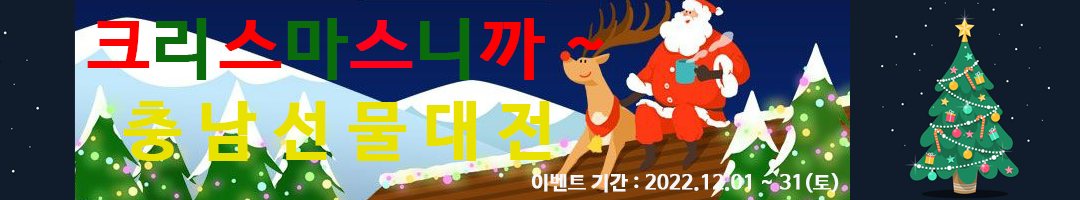
<style>
.page{position:relative;width:1080px;height:200px;background:#101b2c}
.page>*{position:absolute;margin:0}
.t1{font:66px "HCRDotum-Bold";color:#ff0000;font-weight:bold}
.t2{font:60px "HCRDotum-Bold";color:#ff0000;font-weight:bold}
.t3{font:66px "HCRDotum-Bold";color:#0b6c0b;font-weight:bold}
.t4{font:66px "HCRDotum-Bold";color:#ff0018;font-weight:bold}
.t5{font:64px "NanumBarunGothicBold";color:#e9e100;font-weight:bold}
.t6{font:20px "NanumBarunGothicBold";color:#f7f7f7;font-weight:bold}
</style>
<div class="page">
<p class="t1" style="left:87px;top:18px;width:517px;height:62px"><span class="t2"> </span>크<span class="t3">리</span>스<span class="t3">마</span><span class="t4">스</span><span class="t3">니</span>까 ~</p>
<p class="t5" style="left:123px;top:101px;width:428px;height:60px">충 남 선 물 대 전</p>
<p class="t6" style="left:531px;top:173px;width:308px;height:20px">이벤트 기간 : 2022.12.01 ~ 31(토)</p>
</div>
